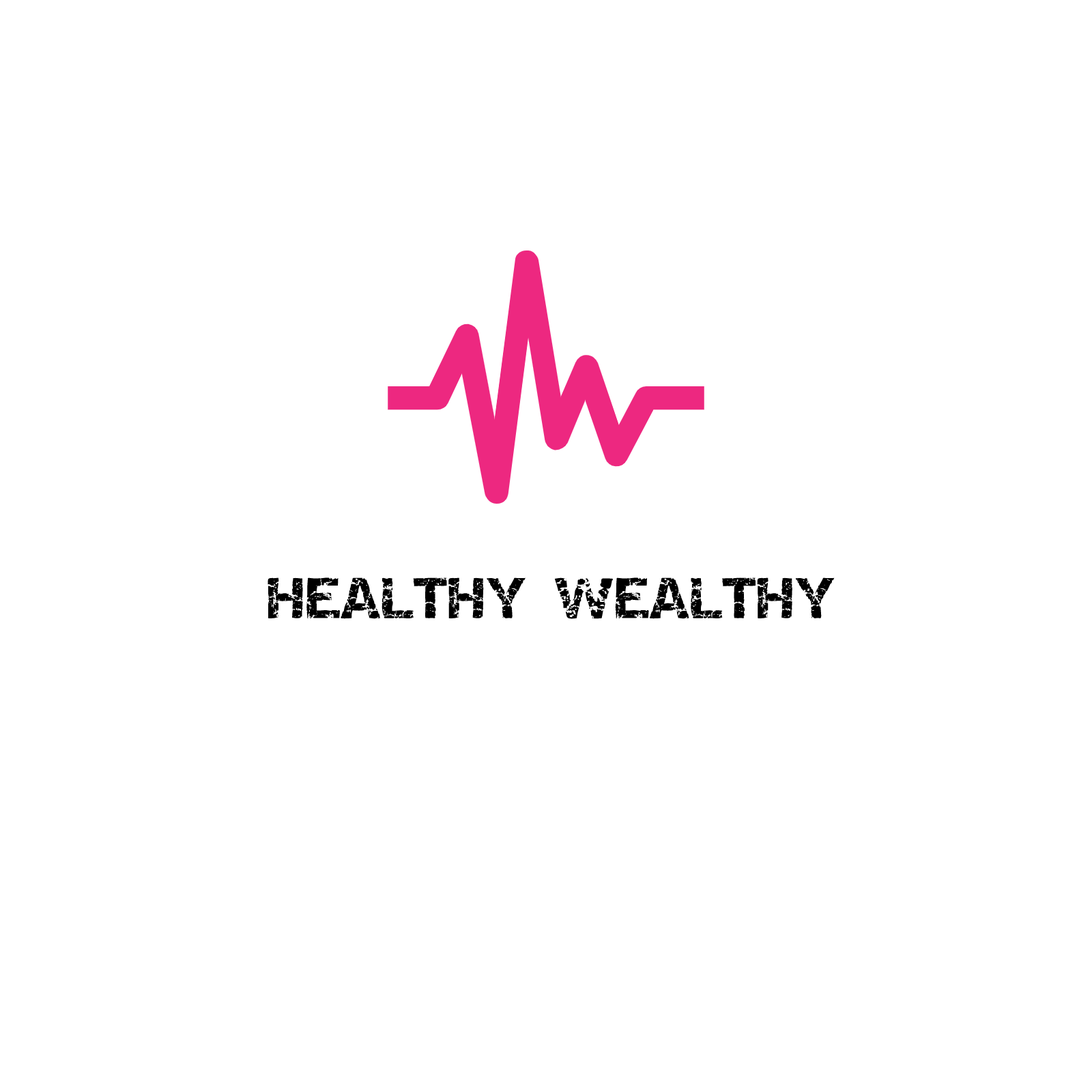
<style>
.page{position:relative;width:1092px;height:1092px;background:#ffffff}
.page>*{position:absolute;margin:0}
.t1{font:40.3px "Destroy";color:#000000}
</style>
<div class="page">
<p class="t1" style="left:268px;top:577px;width:567px;height:42px">HEALTHY wEALTHY</p>
</div>
